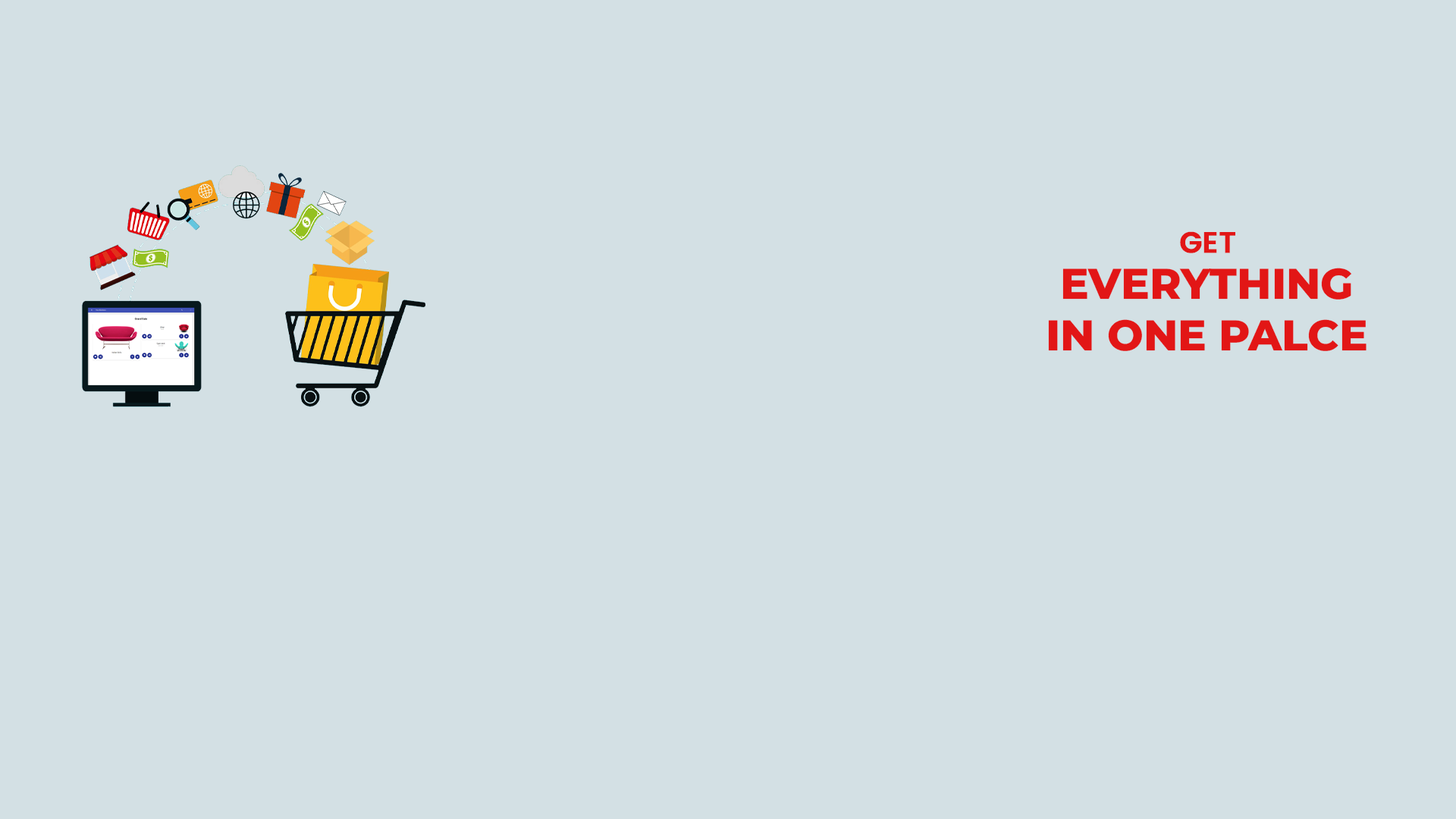
<style>
.page{position:relative;width:1456px;height:819px;background:#d3e0e4}
.page>*{position:absolute;margin:0}
.t1{font:29.4px "Poppins-SemiBold";color:#e21616;text-transform:uppercase;font-weight:bold}
.t2{font:42.7px "MontserratRoman-ExtraBold";color:#e21616;font-weight:bold}
</style>
<div class="page">
<p class="t1" style="left:1180px;top:231px;width:55px;height:22px">GET</p>
<p class="t2" style="left:1048px;top:268px;width:318px;height:83px;text-align:center">EVERYTHING<br>IN ONE PALCE</p>
</div>
